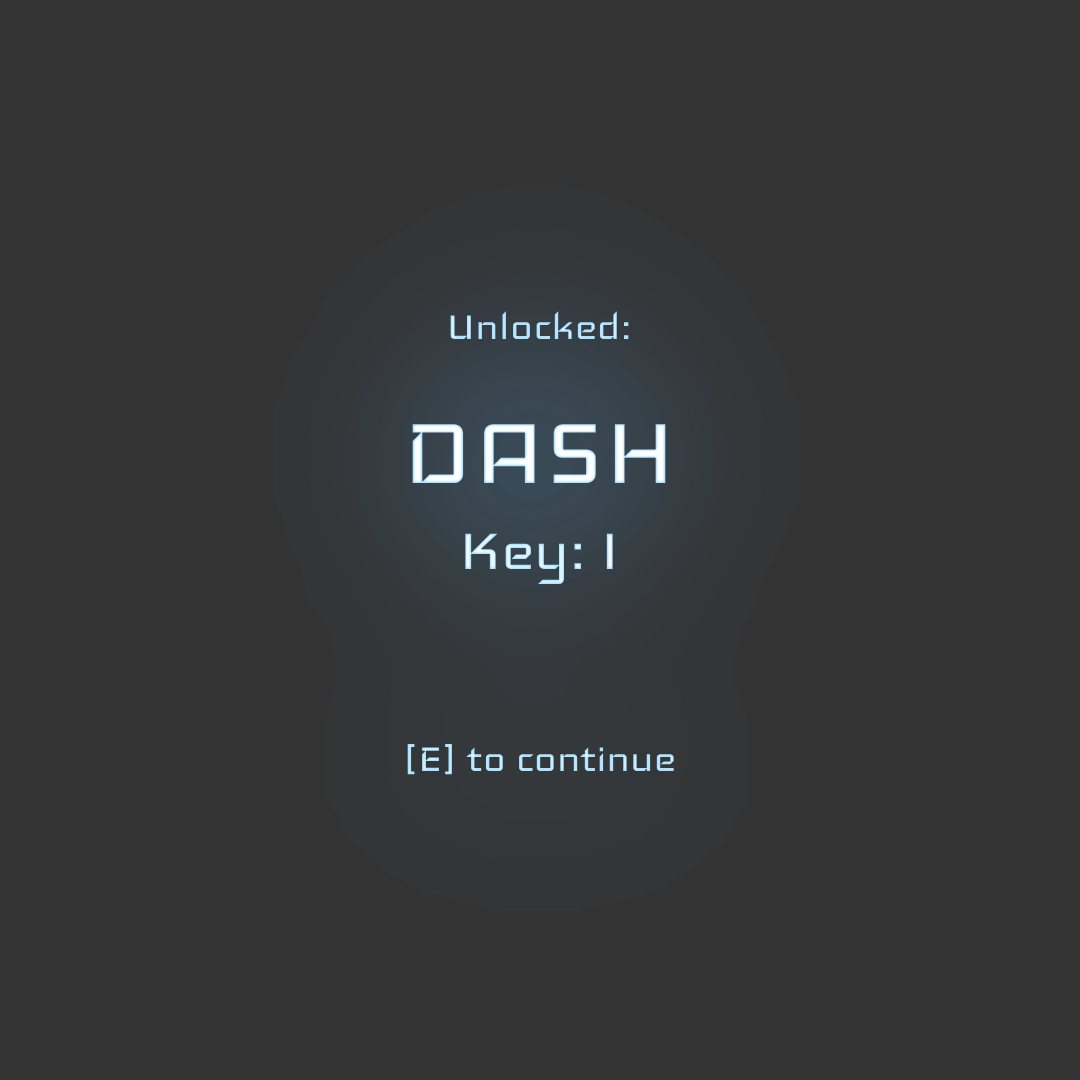
<style>
.page{position:relative;width:1080px;height:1080px;background:#333333}
.page>*{position:absolute;margin:0}
.t1{font:48px "Iceland-Regular"}
.t2{font:120px "Iceland-Regular"}
.t3{font:72px "Iceland-Regular"}
</style>
<div class="page">
<p class="t1" style="left:407px;top:311px;width:267px;height:464px;text-align:center">Unlocked:<br><span class="t2">DASH<br></span><span class="t3">Key: I<br><br></span>[E] to continue</p>
</div>
